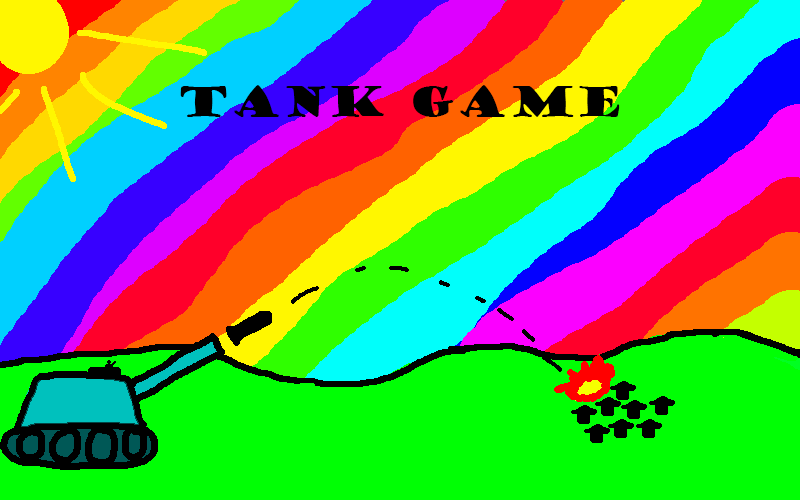
<style>
.page{position:relative;width:800px;height:500px;background:#00ff04}
.page>*{position:absolute;margin:0}
.t1{font:40px "GoudyStout";color:#000000}
</style>
<div class="page">
<p class="t1" style="left:180px;top:85px;width:440px;height:32px">Tank Game</p>
</div>
